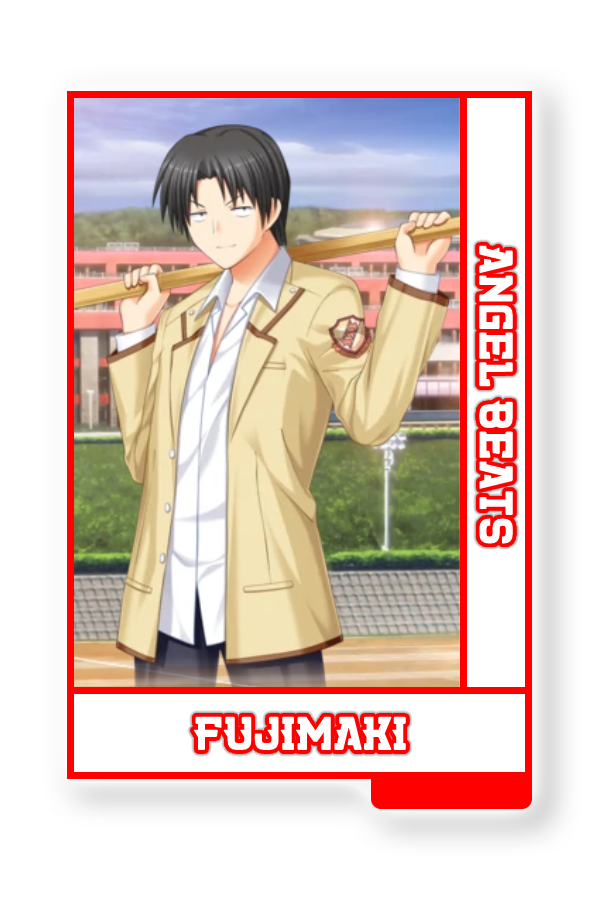
<style>
.page{position:relative;width:600px;height:900px;background:#ffffff}
.page>*{position:absolute;margin:0}
.t1{font:48.8px "KillerCollege";color:#ffffff}
.t2{font:48.6px "KillerCollege";color:#ffffff}
</style>
<div class="page">
<p class="t1" style="left:479px;top:245px;width:34px;height:299px;rotate:90deg">Angel Beats</p>
<p class="t2" style="left:193px;top:716px;width:213px;height:35px">FUJIMAKI</p>
</div>
